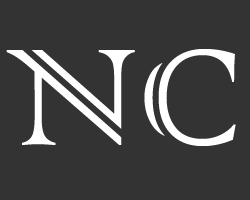
<style>
.page{position:relative;width:250px;height:200px;background:#333333}
.page>*{position:absolute;margin:0}
.t1{font:182.2px "ColonnaMT";color:#ffffff;scale:0.97 1}
</style>
<div class="page">
<p class="t1" style="left:6px;top:49px;width:230px;height:97px">NC</p>
</div>
